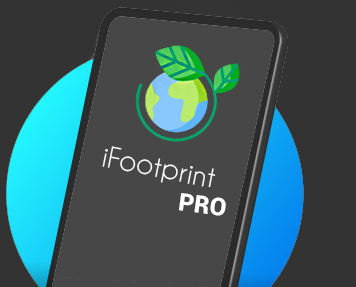
<style>
.page{position:relative;width:356px;height:287px;background:#474747}
.page>*{position:absolute;margin:0}
.t1{font:27.2px "CaviarDreams";color:#ffffff}
.t2{font:24.5px "Roboto-Black";color:#ffffff}
</style>
<div class="page">
<p class="t1" style="left:102px;top:146px;width:114px;height:42px;rotate:11deg">iFootprint</p>
<p class="t2" style="left:179px;top:193px;width:47px;height:23px;rotate:8deg">PRO</p>
</div>
